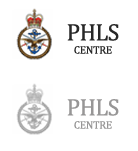
<style>
.page{position:relative;width:138px;height:151px;background:#ffffff}
.page>*{position:absolute;margin:0}
.t1{font:11px "Cambria";letter-spacing:-0.025em;color:#272727}
.t2{font:24px "Cambria";letter-spacing:-0.025em;color:#272727}
.t3{font:11px "Cambria";letter-spacing:-0.025em;color:#979696}
.t4{font:24px "Cambria";letter-spacing:-0.025em;color:#979696}
</style>
<div class="page">
<p class="t1" style="left:67px;top:24px;width:52px;height:30px;text-align:center"><span class="t2">PHLS<br></span>CENTRE</p>
<p class="t3" style="left:67px;top:99px;width:52px;height:30px;text-align:center"><span class="t4">PHLS<br></span>CENTRE</p>
</div>
